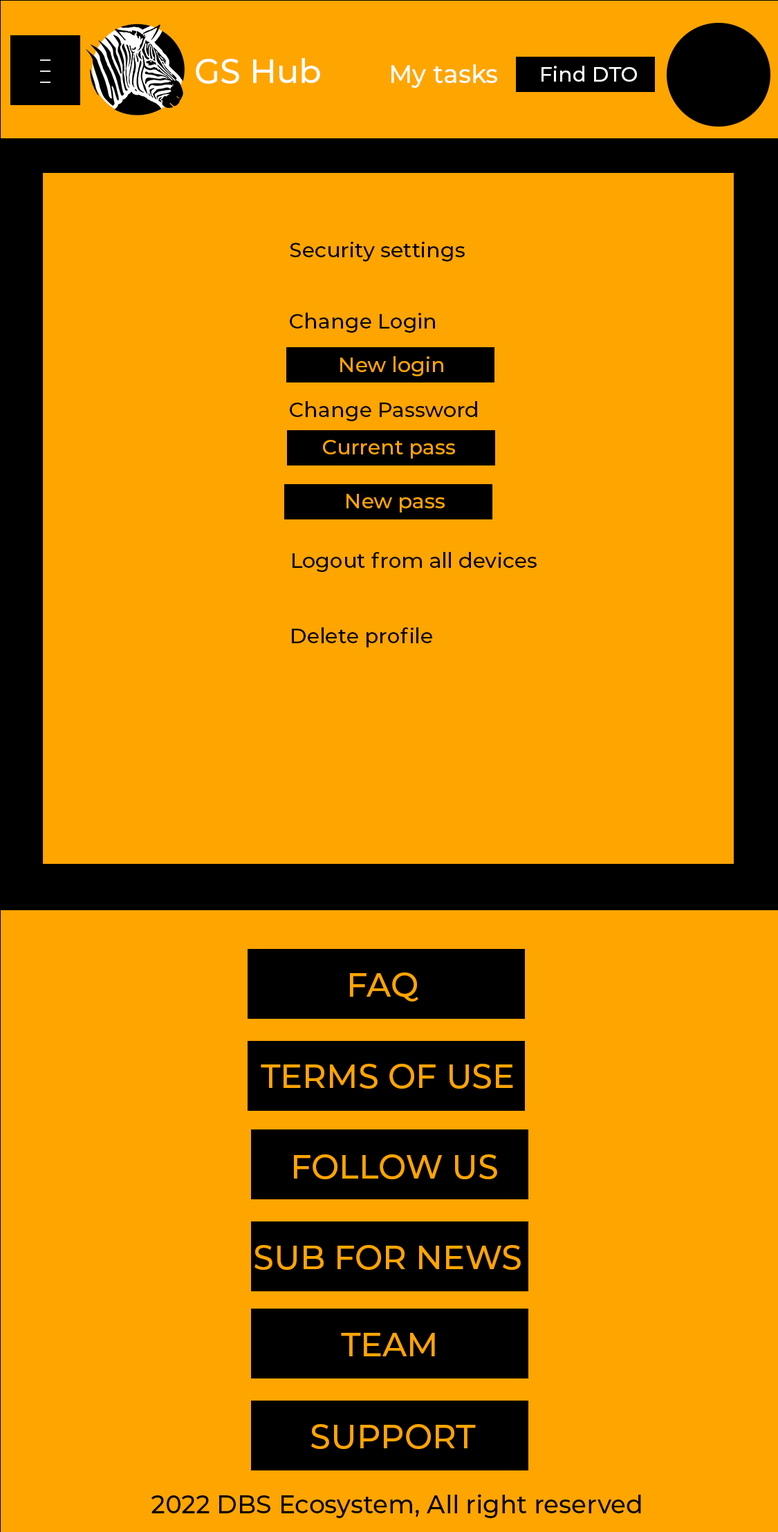
<style>
.page{position:relative;width:778px;height:1532px;background:#ffa500}
.page>*{position:absolute;margin:0}
.t1{font:20.8px/11.1px "Montserrat-Medium";color:#ffffff}
.t2{font:33.2px "Montserrat-Medium";color:#ffffff}
.t3{font:24.9px "Montserrat-Medium";color:#ffffff}
.t4{font:20.8px "Montserrat-Medium";color:#ffffff}
.t5{font:20.8px "Montserrat-Medium";color:#000000}
.t6{font:20.8px "Montserrat-Medium";color:#ffa500}
.t7{font:33.2px "Montserrat-Medium";color:#ffa500}
.t8{font:24.9px "Montserrat-Medium";color:#000000}
</style>
<div class="page">
<p class="t1" style="left:40px;top:59px;width:10px;height:24px;text-align:justify">_<br>_<br>_</p>
<p class="t2" style="left:196px;top:58px;width:124px;height:26px">GS Hub</p>
<p class="t3" style="left:392px;top:64px;width:105px;height:24px">My tasks</p>
<p class="t4" style="left:542px;top:66px;width:95px;height:16px">Find DTO</p>
<p class="t5" style="left:290px;top:241px;width:175px;height:20px">Security settings</p>
<p class="t6" style="left:340px;top:356px;width:103px;height:20px">New login</p>
<p class="t6" style="left:323px;top:440px;width:132px;height:19px">Current pass</p>
<p class="t6" style="left:347px;top:494px;width:98px;height:19px">New pass</p>
<p class="t5" style="left:293px;top:552px;width:244px;height:20px">Logout from all devices</p>
<p class="t5" style="left:292px;top:627px;width:140px;height:20px">Delete profile</p>
<p class="t7" style="left:350px;top:973px;width:69px;height:29px">FAQ</p>
<p class="t7" style="left:261px;top:1064px;width:252px;height:25px">TERMS OF USE</p>
<p class="t7" style="left:294px;top:1155px;width:203px;height:24px">FOLLOW US</p>
<p class="t7" style="left:255px;top:1245px;width:266px;height:25px">SUB FOR NEWS</p>
<p class="t7" style="left:341px;top:1333px;width:94px;height:24px">TEAM</p>
<p class="t7" style="left:311px;top:1424px;width:165px;height:25px">SUPPORT</p>
<p class="t8" style="left:151px;top:1494px;width:490px;height:24px">2022 DBS Ecosystem, All right reserved</p>
</div>
